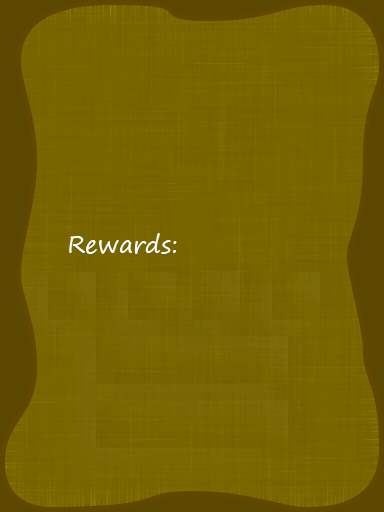
<style>
.page{position:relative;width:384px;height:512px;background:#786500}
.page>*{position:absolute;margin:0}
.t1{font:24px "SegoePrint";color:#ffffff}
</style>
<div class="page">
<p class="t1" style="left:69px;top:233px;width:108px;height:21px">Rewards:</p>
</div>
